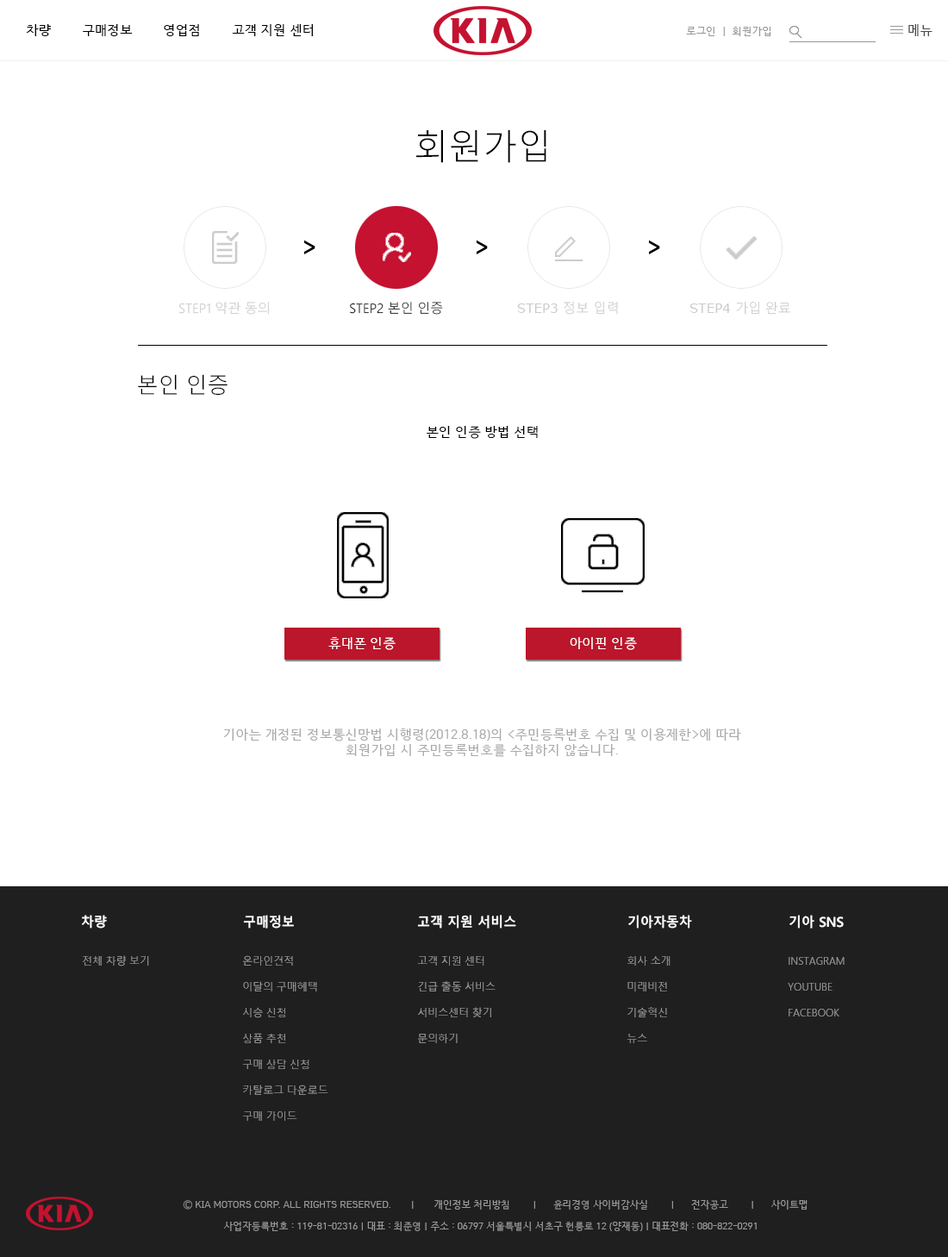
<style>
.page{position:relative;width:948px;height:1257px;background:#ffffff}
.page>*{position:absolute;margin:0}
.t1{font:12.9px "HCRDotum";color:#000000}
.t2{font:10.3px "HCRDotum";color:#979797}
.t3{font:12.9px "HCRDotum";color:#4c4c4c}
.t4{font:34.3px "MalgunGothic-Semilight";color:#000000}
.t5{font:13px "MalgunGothic-Semilight";color:#cccccc}
.t6{font:13px "MalgunGothic-Semilight";color:#000000}
.t7{font:13.1px "Verdana";color:#cccccc}
.t8{font:13.1px "MalgunGothic-Semilight";color:#cccccc}
.t9{font:21.3px "MalgunGothic-Semilight";color:#000000}
.t10{font:13.1px "HCRDotum";color:#000000}
.t11{font:12.9px "HCRDotum";color:#ffffff}
.t12{font:12.9px "HCRDotum";color:#aaaaaa}
.t13{font:13.3px "MalgunGothicBold";color:#ffffff;scale:0.97 1}
.t14{font:10.3px "MalgunGothic-Semilight";color:#979797}
.t15{font:10.3px/25.9px "MalgunGothic-Semilight";color:#979797}
.t16{font:9.5px "HCRDotum";color:#999999}
</style>
<div class="page">
<p class="t1" style="left:26px;top:24px;width:287px;height:12px">차량        구매정보        영업점        고객 지원 센터</p>
<p class="t2" style="left:686px;top:27px;width:86px;height:9px">로그인  |  회원가입</p>
<p class="t3" style="left:909px;top:24px;width:24px;height:12px">메뉴</p>
<p class="t4" style="left:416px;top:130px;width:131px;height:33px">회원가입</p>
<p class="t5" style="left:178px;top:302px;width:91px;height:13px">STEP1 약관 동의</p>
<p class="t6" style="left:350px;top:302px;width:93px;height:13px">STEP2 본인 인증</p>
<p class="t7" style="left:517px;top:301px;width:101px;height:14px">STEP3 <span class="t8">정보 입력</span></p>
<p class="t7" style="left:690px;top:301px;width:101px;height:14px">STEP4 <span class="t8">가입 완료</span></p>
<p class="t9" style="left:138px;top:374px;width:90px;height:22px">본인 인증</p>
<p class="t10" style="left:427px;top:426px;width:111px;height:13px">본인 인증 방법 선택</p>
<p class="t11" style="left:329px;top:637px;width:67px;height:13px">휴대폰 인증</p>
<p class="t11" style="left:570px;top:637px;width:67px;height:13px">아이핀 인증</p>
<p class="t12" style="left:223px;top:729px;width:519px;height:28px;text-align:center">기아는 개정된 정보통신망법 시행령(2012.8.18)의 &lt;주민등록번호 수집 및 이용제한&gt;에 따라<br>회원가입 시 주민등록번호를 수집하지 않습니다.</p>
<p class="t13" style="left:81px;top:915px;width:26px;height:14px">차량</p>
<p class="t13" style="left:243px;top:915px;width:51px;height:14px">구매정보</p>
<p class="t13" style="left:417px;top:915px;width:99px;height:14px">고객 지원 서비스</p>
<p class="t13" style="left:629px;top:915px;width:63px;height:14px">기아자동차</p>
<p class="t13" style="left:790px;top:915px;width:54px;height:14px">기아 SNS</p>
<p class="t14" style="left:83px;top:955px;width:66px;height:12px">전체 차량 보기</p>
<p class="t15" style="left:242px;top:955px;width:87px;height:166px">온라인견적<br>이달의 구매혜택<br>시승 신청<br>상품 추천<br>구매 상담 신청<br>카탈로그 다운로드<br>구매 가이드</p>
<p class="t15" style="left:417px;top:956px;width:79px;height:87px">고객 지원 센터<br>긴급 출동 서비스<br>서비스센터 찾기<br>문의하기</p>
<p class="t15" style="left:627px;top:956px;width:44px;height:87px">회사 소개<br>미래비전<br>기술혁신<br>뉴스</p>
<p class="t15" style="left:788px;top:957px;width:57px;height:60px">INSTAGRAM<br>YOUTUBE<br>FACEBOOK</p>
<p class="t16" style="left:183px;top:1200px;width:625px;height:10px">Ⓒ KIA MOTORS CORP. ALL RIGHTS RESERVED.       |       개인정보 처리방침        |      윤리경영 사이버감사실        |      전자공고        |      사이트맵</p>
<p class="t16" style="left:224px;top:1222px;width:533px;height:9px">사업자등록번호 : 119-81-02316 | 대표 : 최준영 | 주소 : 06797 서울특별시 서초구 헌릉로 12 (양재동) | 대표전화 : 080-822-0291</p>
</div>
